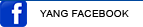
<style>
.page{position:relative;width:143px;height:27px;background:#ffffff}
.page>*{position:absolute;margin:0}
.t1{font:10.4px "ArialMT";color:#000000}
</style>
<div class="page">
<p class="t1" style="left:40px;top:10px;width:89px;height:7px">YANG FACEBOOK</p>
</div>
